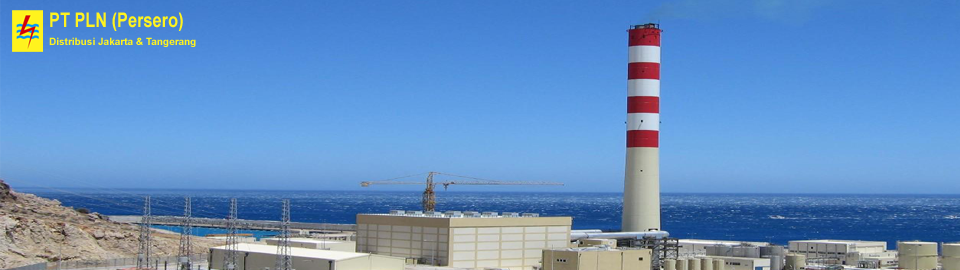
<style>
.page{position:relative;width:960px;height:270px}
.page>*{position:absolute;margin:0}
.t1{font:20.3px "Arial-BoldMT";color:#fff31e;scale:0.8 1}
.t2{font:10px "Arial-BoldMT";color:#fff31e}
</style>
<div class="page">
<p class="t1" style="left:50px;top:12px;width:133px;height:19px">PT PLN (Persero)</p>
<p class="t2" style="left:49px;top:37px;width:147px;height:10px">Distribusi Jakarta &amp; Tangerang</p>
</div>
